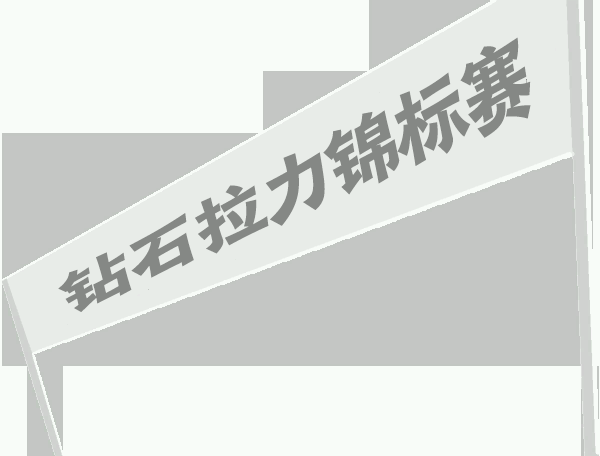
<style>
.page{position:relative;width:600px;height:456px;background:#f8fcf8}
.page>*{position:absolute;margin:0}
.t1{font:72.8px "HYRuiYunXiuWu-85W";letter-spacing:-0.1em;color:#858885;scale:1.13 1}
</style>
<div class="page">
<p class="t1" style="left:58px;top:37px;width:473px;height:275px;rotate:-25deg">钻石拉力锦标赛</p>
</div>
